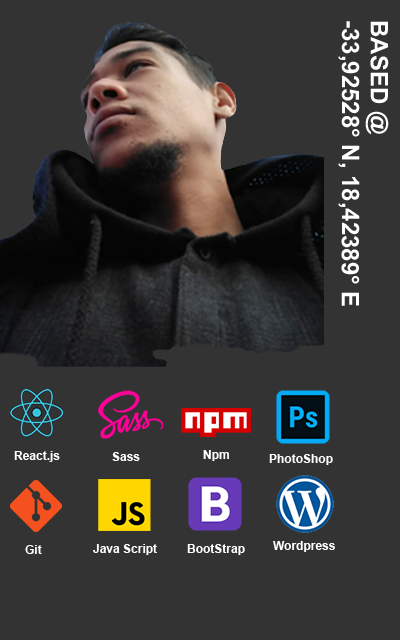
<style>
.page{position:relative;width:400px;height:640px;background:#333333}
.page>*{position:absolute;margin:0}
.t1{font:24px "Arial-BoldMT";color:#ffffff}
.t2{font:12px "Arial-BoldMT";color:#ffffff}
</style>
<div class="page">
<p class="t1" style="left:338px;top:21px;width:51px;height:285px;rotate:90deg">BASED @ <br>-33,92528° N, 18,42389° E</p>
<p class="t2" style="left:14px;top:451px;width:46px;height:11px">React.js</p>
<p class="t2" style="left:112px;top:452px;width:28px;height:9px">Sass</p>
<p class="t2" style="left:203px;top:450px;width:26px;height:11px">Npm</p>
<p class="t2" style="left:269px;top:454px;width:64px;height:11px">PhotoShop</p>
<p class="t2" style="left:25px;top:545px;width:17px;height:9px">Git</p>
<p class="t2" style="left:93px;top:544px;width:64px;height:11px">Java Script</p>
<p class="t2" style="left:187px;top:544px;width:58px;height:11px">BootStrap</p>
<p class="t2" style="left:273px;top:541px;width:62px;height:11px">Wordpress</p>
</div>
